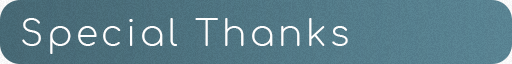
<style>
.page{position:relative;width:512px;height:64px}
.page>*{position:absolute;margin:0}
.t1{font:36px "Comfortaa-Light";letter-spacing:0.1em;color:#ffffff}
</style>
<div class="page">
<p class="t1" style="left:22px;top:18px;width:326px;height:36px">Special Thanks</p>
</div>
